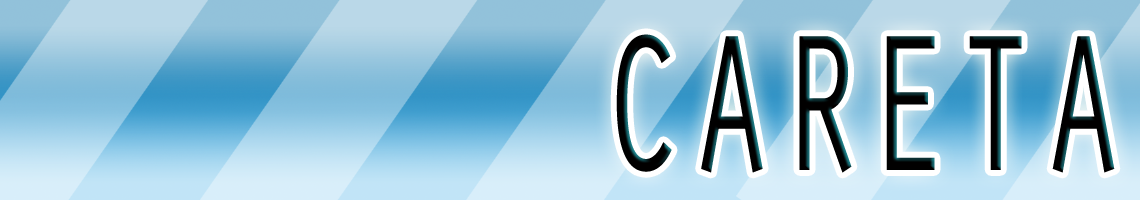
<style>
.page{position:relative;width:1140px;height:200px}
.page>*{position:absolute;margin:0}
.t1{font:200px "OratorStd";color:#010000;scale:0.73 1}
</style>
<div class="page">
<p class="t1" style="left:616px;top:34px;width:499px;height:139px">CARETA</p>
</div>
